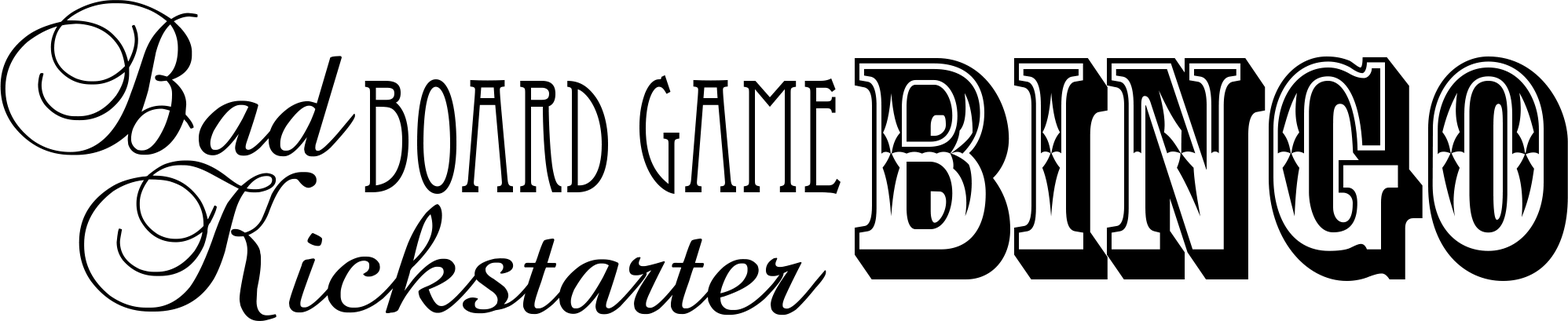
<style>
.page{position:relative;width:1568px;height:321px;background:#ffffff}
.page>*{position:absolute;margin:0}
.t1{font:99.1px "BaroqueScript";color:#000000;scale:1.13 1}
.t2{font:295.2px "RosewoodStd-Regular";color:#000000;scale:0.9 1}
.t3{font:157.1px "EccentricStd";color:#000000;scale:0.76 1}
.t4{font:99.2px "BaroqueScript";color:#000000;scale:1.12 1}
</style>
<div class="page">
<p class="t1" style="left:0px;top:0px;width:355px;height:157px">Bad</p>
<p class="t2" style="left:855px;top:56px;width:713px;height:225px">BINGO</p>
<p class="t3" style="left:365px;top:75px;width:476px;height:119px">BOARD GAME</p>
<p class="t4" style="left:79px;top:160px;width:747px;height:161px">Kickstarter</p>
</div>
